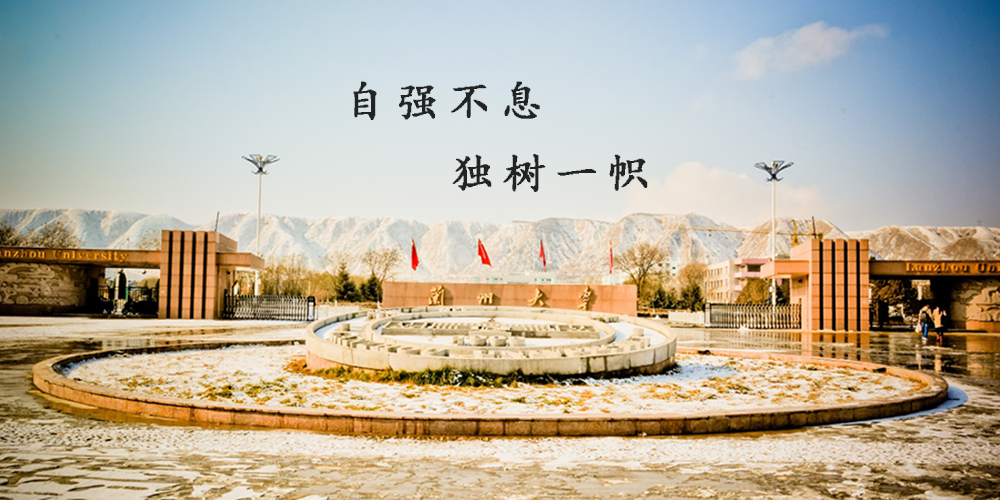
<style>
.page{position:relative;width:1000px;height:500px}
.page>*{position:absolute;margin:0}
.t1{font:43.4px/36.1px "¿¬Ìå";letter-spacing:0.2em;color:#222323;font-weight:bold}
.t2{font:20.4px/36.1px "¿¬Ìå";letter-spacing:0.2em;color:#222323;font-weight:bold}
</style>
<div class="page">
<p class="t1" style="left:353px;top:81px;width:295px;height:111px"><span class="t2"> </span>自强不息<br> <br>    独树一帜</p>
</div>
